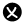
<style>
.page{position:relative;width:25px;height:25px;background:#ffffff}
.page>*{position:absolute;margin:0}
.t1{font:19px "KristenITC-Regular";color:#ffffff}
</style>
<div class="page">
<p class="t1" style="left:6px;top:7px;width:12px;height:11px">x</p>
</div>
